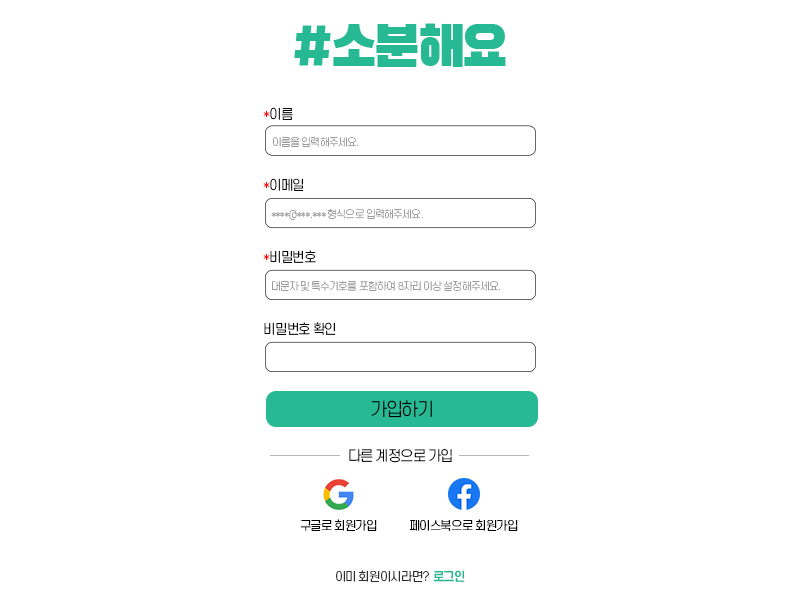
<style>
.page{position:relative;width:800px;height:600px;background:#ffffff}
.page>*{position:absolute;margin:0}
.t1{font:13.2px "S-CoreDream-3Light";letter-spacing:-0.075em;color:#000000}
.t2{font:10.3px "S-CoreDream-2ExtraLight";letter-spacing:-0.075em;color:#999999}
.t3{font:18px "S-CoreDream-3Light";letter-spacing:-0.075em;color:#000000}
.t4{font:14px "S-CoreDream-3Light";letter-spacing:-0.075em;color:#000000}
.t5{font:12px "S-CoreDream-3Light";letter-spacing:-0.075em;color:#000000}
.t6{font:12px "S-CoreDream-3Light";letter-spacing:-0.075em;color:#2e2b2b}
.t7{font:12px "S-CoreDream-6Bold";letter-spacing:-0.075em;color:#27b994}
</style>
<div class="page">
<p class="t1" style="left:263px;top:107px;width:30px;height:13px">*이름</p>
<p class="t2" style="left:273px;top:137px;width:86px;height:10px">이름을 입력해주세요.</p>
<p class="t1" style="left:263px;top:178px;width:41px;height:13px">*이메일</p>
<p class="t2" style="left:271px;top:209px;width:152px;height:11px">****@***.*** 형식으로 입력해주세요.</p>
<p class="t1" style="left:263px;top:250px;width:53px;height:13px">*비밀번호</p>
<p class="t2" style="left:272px;top:281px;width:229px;height:10px">대문자 및 특수기호를 포함하여 8자리 이상 설정해주세요.</p>
<p class="t1" style="left:264px;top:322px;width:72px;height:13px">비밀번호 확인</p>
<p class="t3" style="left:371px;top:400px;width:61px;height:18px">가입하기</p>
<p class="t4" style="left:349px;top:449px;width:103px;height:14px">다른 계정으로 가입</p>
<p class="t5" style="left:300px;top:519px;width:77px;height:12px">구글로 회원가입</p>
<p class="t5" style="left:409px;top:519px;width:109px;height:12px">페이스북으로 회원가입</p>
<p class="t6" style="left:336px;top:570px;width:93px;height:12px">이미 회원이시라면?</p>
<p class="t7" style="left:433px;top:570px;width:32px;height:12px">로그인</p>
</div>
